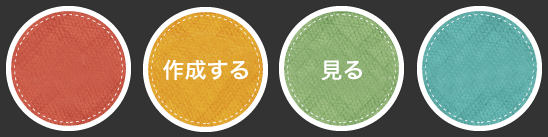
<style>
.page{position:relative;width:548px;height:137px;background:#333333}
.page>*{position:absolute;margin:0}
.t1{font:22px "HiraKakuProN-W6";color:#ffffff}
</style>
<div class="page">
<p class="t1" style="left:163px;top:59px;width:85px;height:21px">作成する</p>
<p class="t1" style="left:321px;top:60px;width:41px;height:21px">見る</p>
</div>
